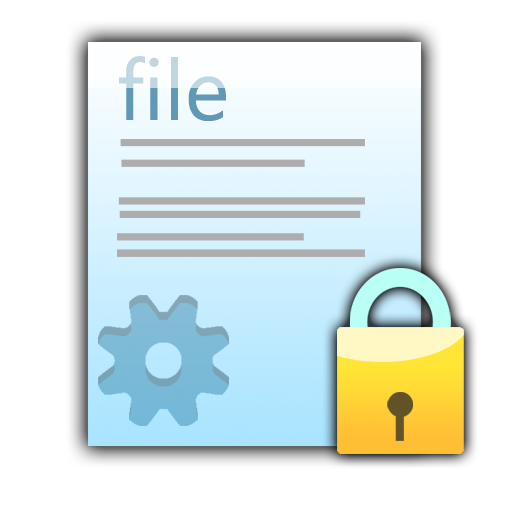
<style>
.page{position:relative;width:512px;height:512px;background:#ffffff}
.page>*{position:absolute;margin:0}
.t1{font:85px "SegoeUI"}
</style>
<div class="page">
<p class="t1" style="left:119px;top:56px;width:107px;height:65px">file</p>
</div>
